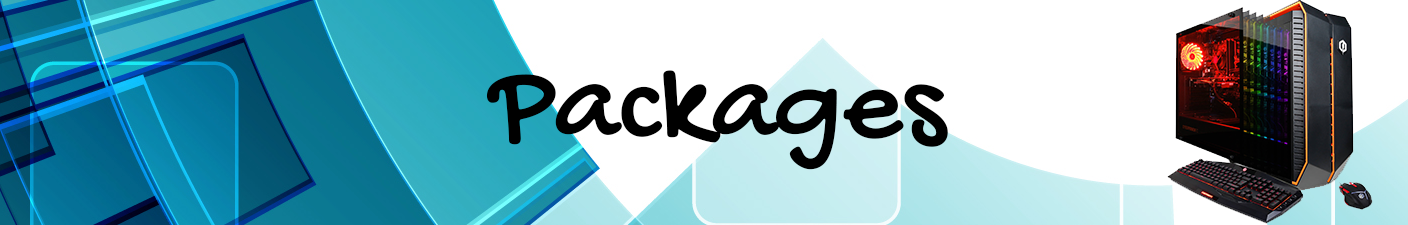
<style>
.page{position:relative;width:1408px;height:225px;background:#ffffff}
.page>*{position:absolute;margin:0}
.t1{font:116.7px "GochiHand-Regular";color:#000000}
</style>
<div class="page">
<p class="t1" style="left:486px;top:70px;width:462px;height:100px">Packages</p>
</div>
